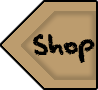
<style>
.page{position:relative;width:98px;height:90px;background:#bc9c6e}
.page>*{position:absolute;margin:0}
.t1{font:22.7px "squeakychalksound";color:#000000}
</style>
<div class="page">
<p class="t1" style="left:33px;top:34px;width:62px;height:29px">Shop</p>
</div>
